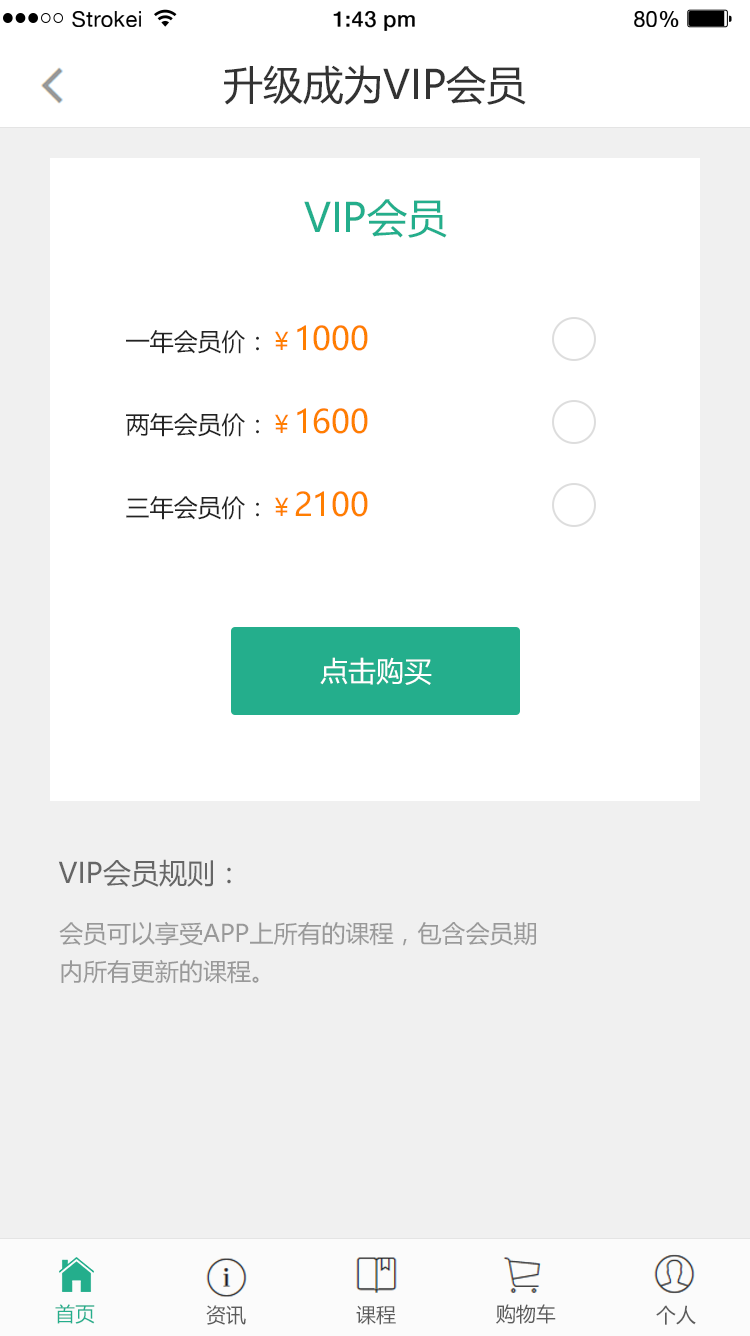
<style>
.page{position:relative;width:750px;height:1336px;background:#ffffff}
.page>*{position:absolute;margin:0}
.t1{font:21.8px "HelveticaNeue";letter-spacing:0.02em;color:#000000}
.t2{font:21.8px "HelveticaNeue-Medium";letter-spacing:0.02em;color:#000000}
.t3{font:40px "MicrosoftYaHei";color:#333333}
.t4{font:40px "MicrosoftYaHei";color:#24ae8c}
.t5{font:24px "MicrosoftYaHei";color:#222222}
.t6{font:24px "MicrosoftYaHei";color:#ff7e00}
.t7{font:32px "MicrosoftYaHei";color:#ff7e00}
.t8{font:28px "MicrosoftYaHei";color:#ffffff}
.t9{font:28px "MicrosoftYaHei";color:#666666}
.t10{font:24px "MicrosoftYaHei";color:#999999}
.t11{font:20px "MicrosoftYaHei";color:#24ae8c}
.t12{font:20px "MicrosoftYaHei";color:#5b5b5b}
</style>
<div class="page">
<p class="t1" style="left:72px;top:11px;width:69px;height:16px">Strokei</p>
<p class="t2" style="left:333px;top:11px;width:82px;height:20px">1:43 pm</p>
<p class="t1" style="left:634px;top:11px;width:45px;height:16px">80<span class="t2">%</span></p>
<p class="t3" style="left:224px;top:65px;width:302px;height:40px">升级成为VIP会员</p>
<p class="t4" style="left:304px;top:199px;width:143px;height:39px">VIP会员</p>
<p class="t5" style="left:126px;top:325px;width:242px;height:29px">一年会员价：<span class="t6">￥</span><span class="t7">1000</span></p>
<p class="t5" style="left:126px;top:408px;width:242px;height:29px">两年会员价：<span class="t6">￥</span><span class="t7">1600</span></p>
<p class="t5" style="left:126px;top:491px;width:242px;height:29px">三年会员价：<span class="t6">￥</span><span class="t7">2100</span></p>
<p class="t8" style="left:320px;top:657px;width:112px;height:28px">点击购买</p>
<p class="t9" style="left:58px;top:859px;width:173px;height:28px">VIP会员规则：</p>
<p class="t10" style="left:59px;top:921px;width:477px;height:25px">会员可以享受APP上所有的课程，包含会员期</p>
<p class="t10" style="left:61px;top:959px;width:198px;height:25px">内所有更新的课程。</p>
<p class="t11" style="left:55px;top:1304px;width:40px;height:20px">首页</p>
<p class="t12" style="left:206px;top:1305px;width:40px;height:20px">资讯</p>
<p class="t12" style="left:356px;top:1305px;width:40px;height:20px">课程</p>
<p class="t12" style="left:496px;top:1304px;width:60px;height:20px">购物车</p>
<p class="t12" style="left:656px;top:1305px;width:40px;height:20px">个人</p>
</div>
